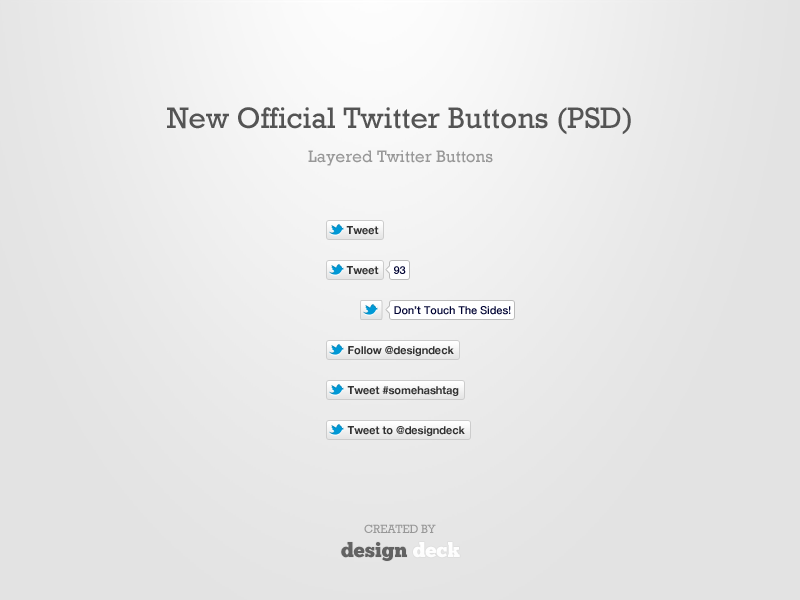
<style>
.page{position:relative;width:800px;height:600px}
.page>*{position:absolute;margin:0}
.t1{font:30px "Rockwell";color:#545454}
.t2{font:17px "Rockwell";color:#989898}
.t3{font:11px "HelveticaNeue-Bold";letter-spacing:-0.005em;color:#323232}
.t4{font:11px "HelveticaNeue-Medium";letter-spacing:-0.005em;color:#000333}
.t5{font:12px "Rockwell";letter-spacing:-0.015em;color:#989898;text-transform:uppercase}
.t6{font:20px "ChunkFive";letter-spacing:0.005em;color:#626262}
.t7{font:20px "ChunkFive";letter-spacing:0.005em;color:#ffffff}
</style>
<div class="page">
<p class="t1" style="left:167px;top:107px;width:464px;height:28px">New Official Twitter Buttons (PSD)</p>
<p class="t2" style="left:308px;top:150px;width:185px;height:16px">Layered Twitter Buttons</p>
<p class="t3" style="left:346px;top:226px;width:33px;height:9px">Tweet</p>
<p class="t3" style="left:346px;top:266px;width:33px;height:9px">Tweet</p>
<p class="t4" style="left:394px;top:266px;width:12px;height:8px">93</p>
<p class="t4" style="left:394px;top:306px;width:117px;height:9px">Don’t Touch The Sides!</p>
<p class="t3" style="left:348px;top:346px;width:106px;height:10px">Follow @designdeck</p>
<p class="t3" style="left:347px;top:386px;width:112px;height:10px">Tweet #somehashtag</p>
<p class="t3" style="left:347px;top:426px;width:118px;height:10px">Tweet to @designdeck</p>
<p class="t5" style="left:364px;top:524px;width:72px;height:9px">Created by</p>
<p class="t6" style="left:341px;top:542px;width:119px;height:19px">design <span class="t7">deck</span></p>
</div>
